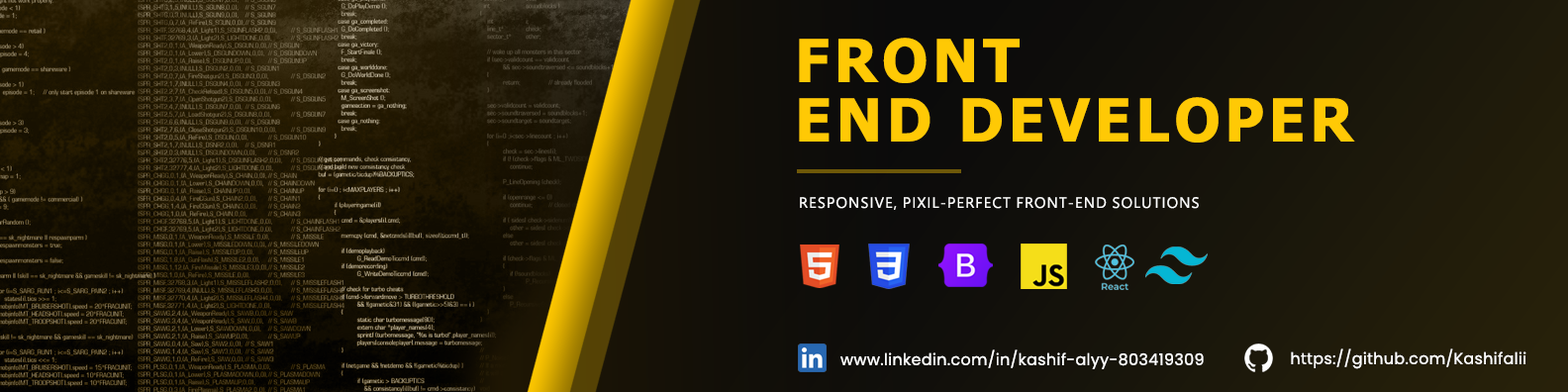
<style>
.page{position:relative;width:1568px;height:392px}
.page>*{position:absolute;margin:0}
.t1{font:59.4px/59.4px "Tahoma-Bold";letter-spacing:0.08em;color:#ffc905}
.t2{font:13.9px "MicrosoftJhengHeiRegular";letter-spacing:0.08em;color:#fffffe}
.t3{font:15.8px "Poppins-Regular";letter-spacing:0.02em;color:#ffffff}
</style>
<div class="page">
<p class="t1" style="left:799px;top:38px;width:556px;height:105px">FRONT<br>END DEVELOPER</p>
<p class="t2" style="left:800px;top:197px;width:399px;height:13px">RESPONSIVE, PIXIL-PERFECT FRONT-END SOLUTIONS</p>
<p class="t3" style="left:840px;top:349px;width:364px;height:20px">www.linkedin.com/in/kashif-alyy-803419309</p>
<p class="t3" style="left:1291px;top:348px;width:235px;height:21px">https://github.com/Kashifalii</p>
</div>
